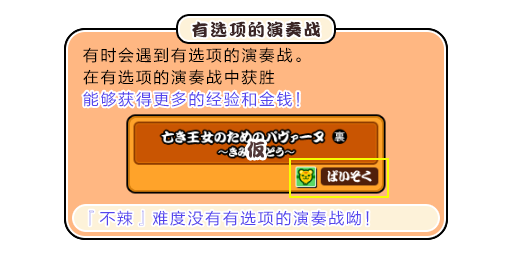
<style>
.page{position:relative;width:512px;height:256px;background:#ffffff}
.page>*{position:absolute;margin:0}
.t1{font:17px "DFPKanTingLiuW9";letter-spacing:0.1em;color:#3b2626}
.t2{font:16px/22px "FZLTHJW--GB1-0";letter-spacing:0.1em;color:#000000}
.t3{font:16px/22px "FZLTHJW--GB1-0";letter-spacing:0.1em;color:#5444ed}
.t4{font:16px "FZLTHJW--GB1-0";letter-spacing:0.1em;color:#5444ed}
</style>
<div class="page">
<p class="t1" style="left:192px;top:21px;width:128px;height:17px">有选项的演奏战</p>
<p class="t2" style="left:83px;top:47px;width:218px;height:60px">有时会遇到有选项的演奏战。<br>在有选项的演奏战中获胜<br><span class="t3">能够获得更多的经验和金钱！</span></p>
<p class="t4" style="left:83px;top:91px;width:216px;height:16px">能够获得更多的经验和金钱！</p>
<p class="t4" style="left:89px;top:210px;width:280px;height:16px">『不辣』难度没有有选项的演奏战呦！</p>
</div>
